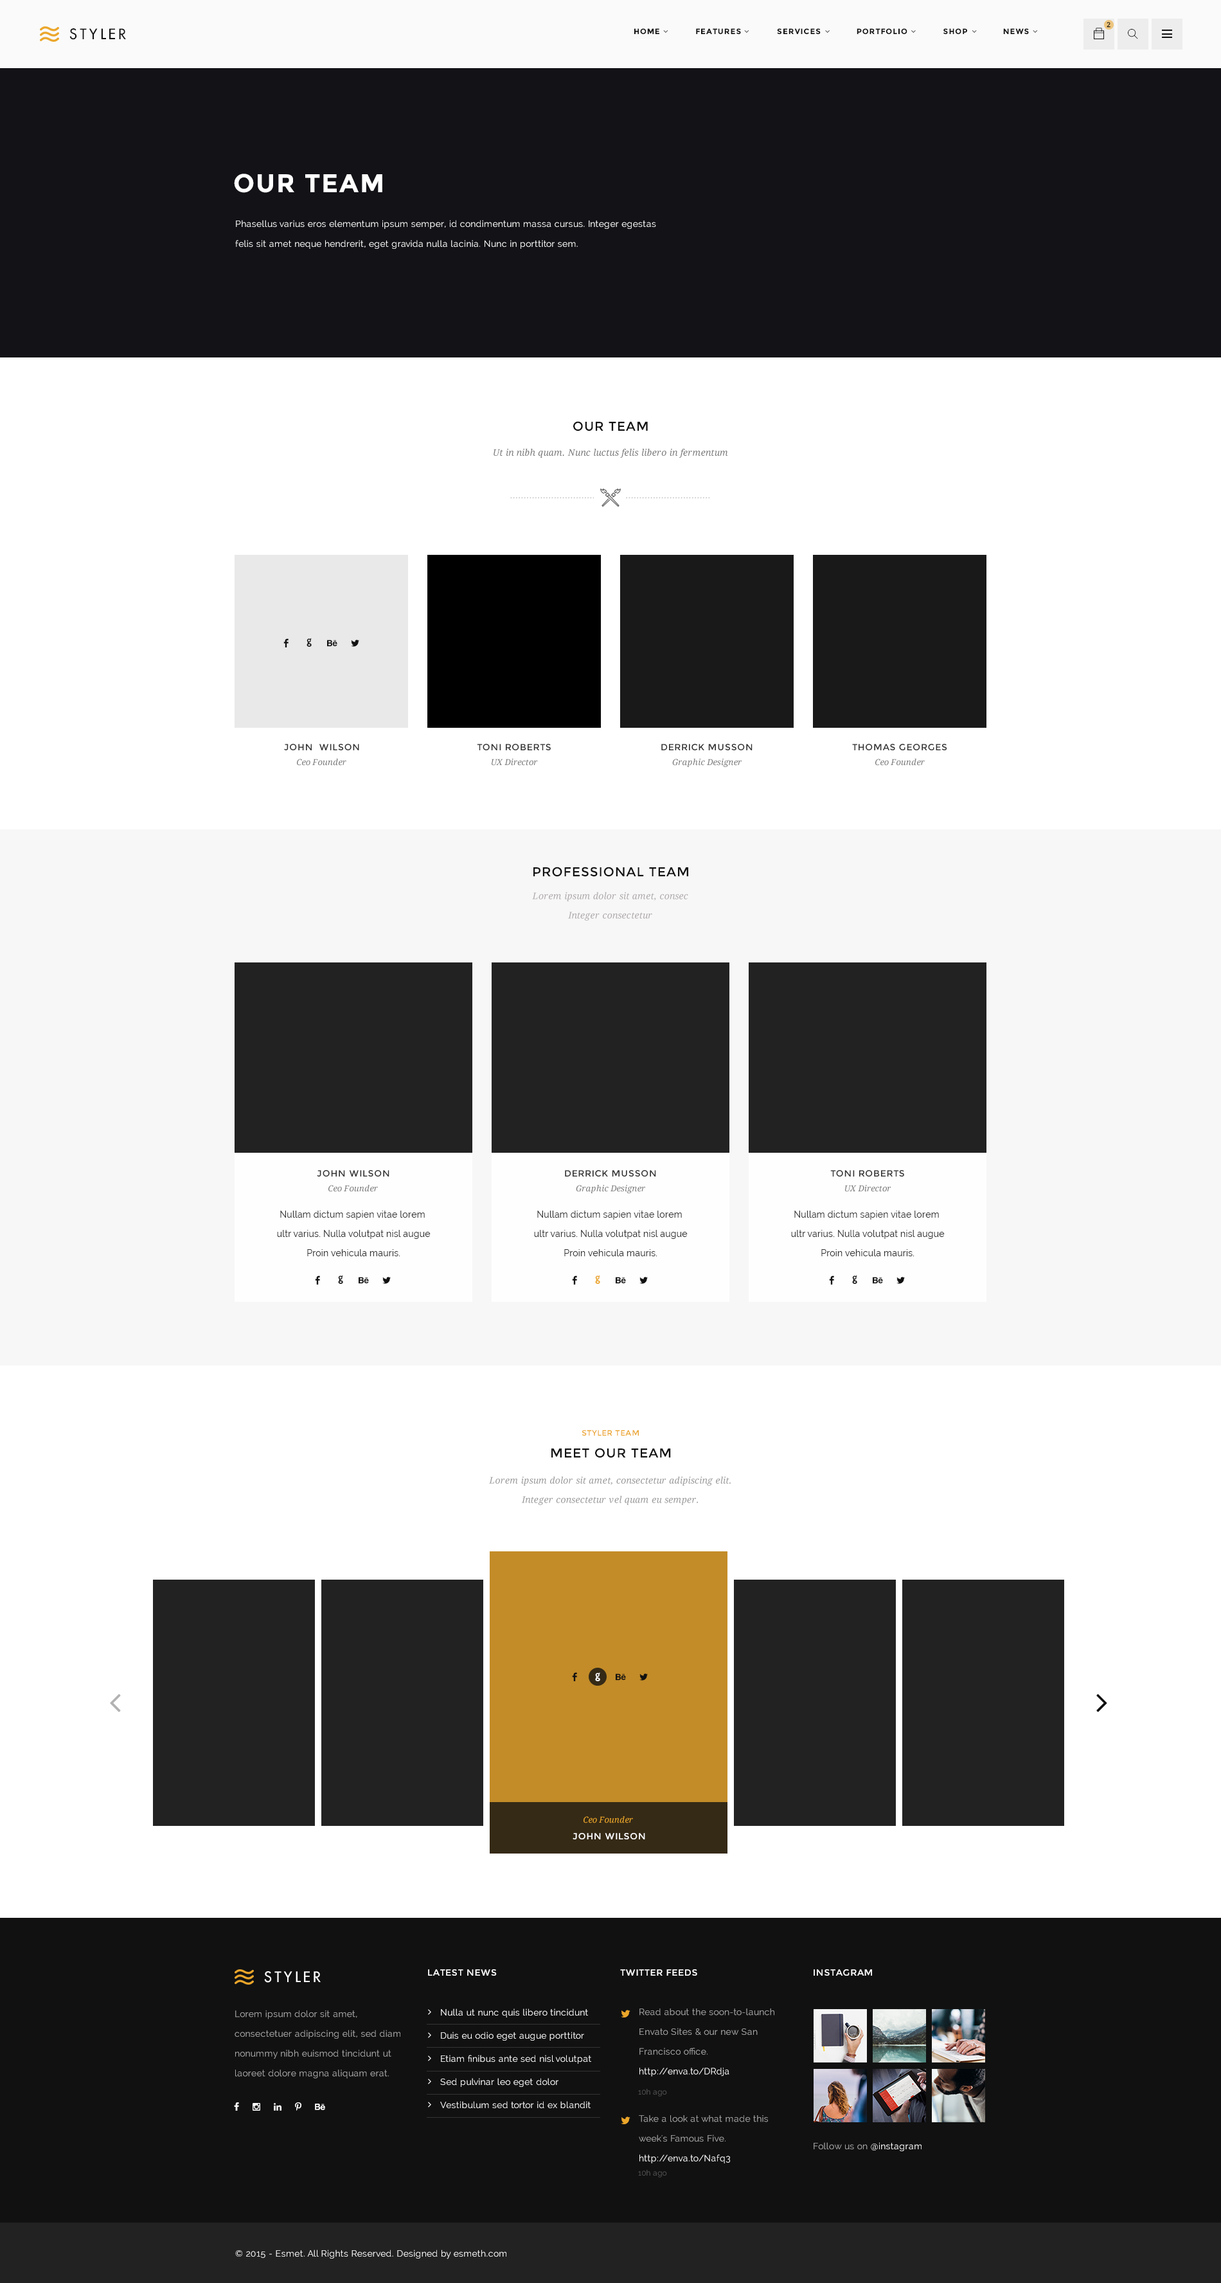
<style>
.page{position:relative;width:1221px;height:2283px;background:#ffffff}
.page>*{position:absolute;margin:0}
.t1{font:14.1px "FuturaLT";letter-spacing:0.2em;color:#111111;text-transform:uppercase}
.t2{font:7.7px "Montserrat-Bold";letter-spacing:0.075em;color:#111111;text-transform:uppercase}
.t3{font:7.1px "Montserrat-Regular";letter-spacing:0.075em;color:#111111;text-transform:uppercase}
.t4{font:25.7px "Montserrat-Bold";letter-spacing:0.05em;color:#ffffff;text-transform:uppercase}
.t5{font:9px/19.8px "Raleway";letter-spacing:0.02em;color:#ffffff}
.t6{font:12.9px "Montserrat-Regular";letter-spacing:0.05em;color:#111111;text-transform:uppercase}
.t7{font:9px "DroidSerif-Italic";letter-spacing:0.02em;color:#777777}
.t8{font:14.1px "Socialico";letter-spacing:0.02em;color:#111111}
.t9{font:9px "Montserrat-Regular";letter-spacing:0.05em;color:#333333;text-transform:uppercase}
.t10{font:8.4px "DroidSerif-Italic";letter-spacing:0.02em;color:#777777}
.t11{font:9px/19.3px "DroidSerif-Italic";letter-spacing:0.02em;color:#afaaaa}
.t12{font:9px/19.3px "Raleway";letter-spacing:0.02em;color:#333333}
.t13{font:14.1px "Socialico";letter-spacing:0.02em;color:#eba62a}
.t14{font:7.7px "Montserrat-Regular";letter-spacing:0.05em;color:#eba62a;text-transform:uppercase}
.t15{font:9px/19.3px "DroidSerif-Italic";letter-spacing:0.02em;color:#999999}
.t16{font:14.1px "Socialico";letter-spacing:0.02em;color:#ffffff}
.t17{font:8.4px "DroidSerif-Italic";letter-spacing:0.02em;color:#eba62a}
.t18{font:9px "Montserrat-Regular";letter-spacing:0.05em;color:#fffefe;text-transform:uppercase}
.t19{font:14.1px "FuturaLT";letter-spacing:0.2em;color:#ffffff;text-transform:uppercase}
.t20{font:9px "Montserrat-Regular";letter-spacing:0.05em;color:#ffffff;text-transform:uppercase}
.t21{font:9px/23.1px "Raleway";letter-spacing:0.02em;color:#ffffff}
.t22{font:9px/19.8px "Raleway";letter-spacing:0.02em;color:#a9a9a9}
.t23{font:7.7px "Raleway";letter-spacing:0.02em;color:#545454}
.t24{font:9px "Raleway";letter-spacing:0.02em;color:#a9a9a9}
.t25{font:9px "Raleway";letter-spacing:0.02em;color:#ffffff}
</style>
<div class="page">
<p class="t1" style="left:69px;top:28px;width:57px;height:12px">styler</p>
<p class="t2" style="left:634px;top:28px;width:395px;height:6px">HOME              FEATURES              SERVICES              portfolio              SHOP              NEWS</p>
<p class="t3" style="left:1107px;top:22px;width:4px;height:6px">2</p>
<p class="t4" style="left:234px;top:174px;width:148px;height:19px">our team</p>
<p class="t5" style="left:235px;top:220px;width:421px;height:29px">Phasellus varius eros elementum ipsum semper, id condimentum massa cursus. Integer egestas felis sit amet neque hendrerit, eget gravida nulla lacinia. Nunc in porttitor sem.</p>
<p class="t6" style="left:573px;top:421px;width:75px;height:10px">our team</p>
<p class="t7" style="left:494px;top:449px;width:234px;height:9px">Ut in nibh quam. Nunc luctus felis libero in fermentum</p>
<p class="t8" style="left:284px;top:638px;width:5px;height:9px">F</p>
<p class="t8" style="left:307px;top:638px;width:5px;height:9px">G</p>
<p class="t8" style="left:327px;top:640px;width:11px;height:7px">E</p>
<p class="t8" style="left:351px;top:640px;width:8px;height:7px">L</p>
<p class="t9" style="left:284px;top:744px;width:75px;height:6px">John  Wilson</p>
<p class="t9" style="left:477px;top:744px;width:74px;height:6px">Toni Roberts</p>
<p class="t9" style="left:662px;top:744px;width:91px;height:6px">Derrick Musson</p>
<p class="t9" style="left:852px;top:744px;width:96px;height:6px">Thomas georges</p>
<p class="t10" style="left:297px;top:759px;width:49px;height:7px">Ceo Founder</p>
<p class="t10" style="left:492px;top:759px;width:46px;height:7px">UX Director</p>
<p class="t10" style="left:672px;top:759px;width:70px;height:8px">Graphic Designer</p>
<p class="t10" style="left:876px;top:759px;width:49px;height:7px">Ceo Founder</p>
<p class="t6" style="left:534px;top:867px;width:154px;height:10px">professional team</p>
<p class="t11" style="left:532px;top:892px;width:156px;height:29px;text-align:center">Lorem ipsum dolor sit amet, consec<br>Integer consectetur</p>
<p class="t9" style="left:317px;top:1170px;width:73px;height:6px">John Wilson</p>
<p class="t9" style="left:565px;top:1170px;width:91px;height:6px">Derrick Musson</p>
<p class="t9" style="left:831px;top:1170px;width:74px;height:6px">Toni Roberts</p>
<p class="t10" style="left:328px;top:1185px;width:50px;height:7px">Ceo Founder</p>
<p class="t10" style="left:576px;top:1185px;width:69px;height:8px">Graphic Designer</p>
<p class="t10" style="left:845px;top:1185px;width:47px;height:7px">UX Director</p>
<p class="t12" style="left:277px;top:1210px;width:154px;height:46px;text-align:center">Nullam dictum sapien vitae lorem <br>ultr varius. Nulla volutpat nisl augue<br>Proin vehicula mauris.</p>
<p class="t12" style="left:534px;top:1210px;width:154px;height:46px;text-align:center">Nullam dictum sapien vitae lorem <br>ultr varius. Nulla volutpat nisl augue<br>Proin vehicula mauris.</p>
<p class="t12" style="left:791px;top:1210px;width:154px;height:46px;text-align:center">Nullam dictum sapien vitae lorem <br>ultr varius. Nulla volutpat nisl augue<br>Proin vehicula mauris.</p>
<p class="t8" style="left:315px;top:1275px;width:5px;height:9px">F</p>
<p class="t8" style="left:338px;top:1275px;width:5px;height:9px">G</p>
<p class="t8" style="left:359px;top:1277px;width:10px;height:7px">E</p>
<p class="t8" style="left:382px;top:1277px;width:9px;height:7px">L</p>
<p class="t8" style="left:572px;top:1275px;width:5px;height:9px">F</p>
<p class="t13" style="left:595px;top:1275px;width:5px;height:9px">G</p>
<p class="t8" style="left:616px;top:1277px;width:10px;height:7px">E</p>
<p class="t8" style="left:640px;top:1277px;width:8px;height:7px">L</p>
<p class="t8" style="left:829px;top:1275px;width:5px;height:9px">F</p>
<p class="t8" style="left:852px;top:1275px;width:6px;height:9px">G</p>
<p class="t8" style="left:873px;top:1277px;width:10px;height:7px">E</p>
<p class="t8" style="left:897px;top:1277px;width:8px;height:7px">L</p>
<p class="t14" style="left:582px;top:1430px;width:57px;height:6px">styler team</p>
<p class="t6" style="left:552px;top:1448px;width:119px;height:10px">meet our team</p>
<p class="t15" style="left:489px;top:1476px;width:242px;height:29px;text-align:center">Lorem ipsum dolor sit amet, consectetur adipiscing elit.<br>Integer consectetur vel quam eu semper.</p>
<p class="t8" style="left:572px;top:1672px;width:5px;height:9px">F</p>
<p class="t16" style="left:595px;top:1672px;width:5px;height:9px">G</p>
<p class="t8" style="left:616px;top:1673px;width:10px;height:7px">E</p>
<p class="t8" style="left:640px;top:1673px;width:8px;height:7px">L</p>
<p class="t17" style="left:584px;top:1816px;width:49px;height:7px">Ceo Founder</p>
<p class="t18" style="left:573px;top:1833px;width:72px;height:6px">John Wilson</p>
<p class="t19" style="left:264px;top:1971px;width:57px;height:12px">styler</p>
<p class="t20" style="left:428px;top:1969px;width:69px;height:7px">latest news</p>
<p class="t20" style="left:620px;top:1969px;width:78px;height:7px">twitter feeds</p>
<p class="t20" style="left:814px;top:1969px;width:58px;height:7px">instagram</p>
<p class="t21" style="left:440px;top:2008px;width:151px;height:101px">Nulla ut nunc quis libero tincidunt<br>Duis eu odio eget augue porttitor<br>Etiam finibus ante sed nisl volutpat<br>Sed pulvinar leo eget dolor<br>Vestibulum sed tortor id ex blandit</p>
<p class="t22" style="left:640px;top:2008px;width:135px;height:68px">Read about the soon-to-launch Envato Sites &amp; our new San Francisco office. <span class="t5">http://enva.to/DRdja</span></p>
<p class="t22" style="left:235px;top:2010px;width:166px;height:68px">Lorem ipsum dolor sit amet, consectetuer adipiscing elit, sed diam nonummy nibh euismod tincidunt ut laoreet dolore magna aliquam erat.</p>
<p class="t23" style="left:638px;top:2089px;width:29px;height:7px">10h ago</p>
<p class="t22" style="left:639px;top:2115px;width:129px;height:48px">Take a look at what made this week's Famous Five. <span class="t5">http://enva.to/Nafq3</span></p>
<p class="t24" style="left:814px;top:2142px;width:108px;height:9px">Follow us on <span class="t25">@instagram</span></p>
<p class="t23" style="left:638px;top:2170px;width:29px;height:7px">10h ago</p>
<p class="t25" style="left:235px;top:2249px;width:272px;height:10px">© 2015 - Esmet. All Rights Reserved. Designed by esmeth.com</p>
</div>
